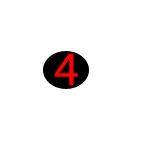
<style>
.page{position:relative;width:150px;height:150px;background:#ffffff}
.page>*{position:absolute;margin:0}
.t1{font:48px "MyriadPro-Regular";color:#ff0000}
</style>
<div class="page">
<p class="t1" style="left:54px;top:53px;width:24px;height:33px">4</p>
</div>
